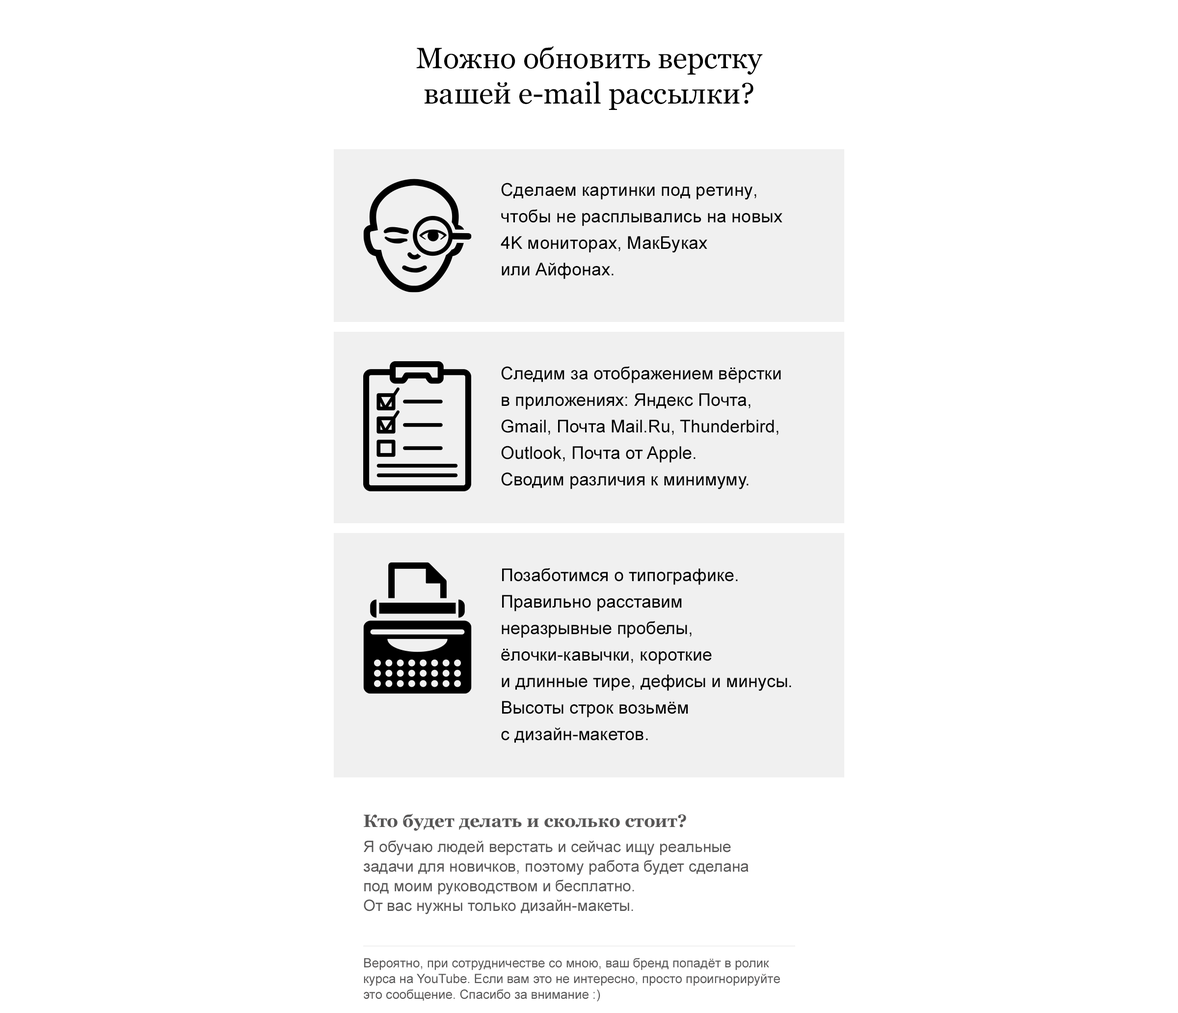
<style>
.page{position:relative;width:1178px;height:1013px;background:#ffffff}
.page>*{position:absolute;margin:0}
.t1{font:29.4px/35.3px "Georgia";color:#000000}
.t2{font:17.7px/26.5px "ArialMT";color:#000000}
.t3{font:17.7px "Georgia-Bold";color:#575656}
.t4{font:15.7px/19.6px "ArialMT";color:#575656}
.t5{font:12.8px/15.7px "ArialMT";color:#575656}
</style>
<div class="page">
<p class="t1" style="left:416px;top:46px;width:346px;height:64px;text-align:center">Можно обновить верстку<br>вашей e-mail рассылки?</p>
<p class="t2" style="left:500px;top:183px;width:282px;height:96px">Сделаем картинки под ретину, чтобы не расплывались на новых 4K мониторах, МакБуках<br>или Айфонах.</p>
<p class="t2" style="left:501px;top:366px;width:280px;height:123px">Следим за отображением вёрстки<br>в приложениях: Яндекс Почта,<br>Gmail, Почта Mail.Ru, Thunderbird,<br>Outlook, Почта от Apple.<br>Сводим различия к минимуму.</p>
<p class="t2" style="left:501px;top:568px;width:290px;height:175px">Позаботимся о типографике.<br>Правильно расставим<br>неразрывные пробелы,<br>ёлочки-кавычки, короткие<br>и длинные тире, дефисы и минусы.<br>Высоты строк возьмём<br>с дизайн-макетов.</p>
<p class="t3" style="left:364px;top:813px;width:322px;height:18px">Кто будет делать и сколько стоит?</p>
<p class="t4" style="left:363px;top:840px;width:385px;height:74px">Я обучаю людей верстать и сейчас ищу реальные<br>задачи для новичков, поэтому работа будет сделана<br>под моим руководством и бесплатно.<br>От вас нужны только дизайн-макеты.</p>
<p class="t5" style="left:364px;top:958px;width:416px;height:43px">Вероятно, при сотрудничестве со мною, ваш бренд попадёт в ролик<br>курса на YouTube. Если вам это не интересно, просто проигнорируйте<br>это сообщение. Спасибо за внимание :)</p>
</div>
